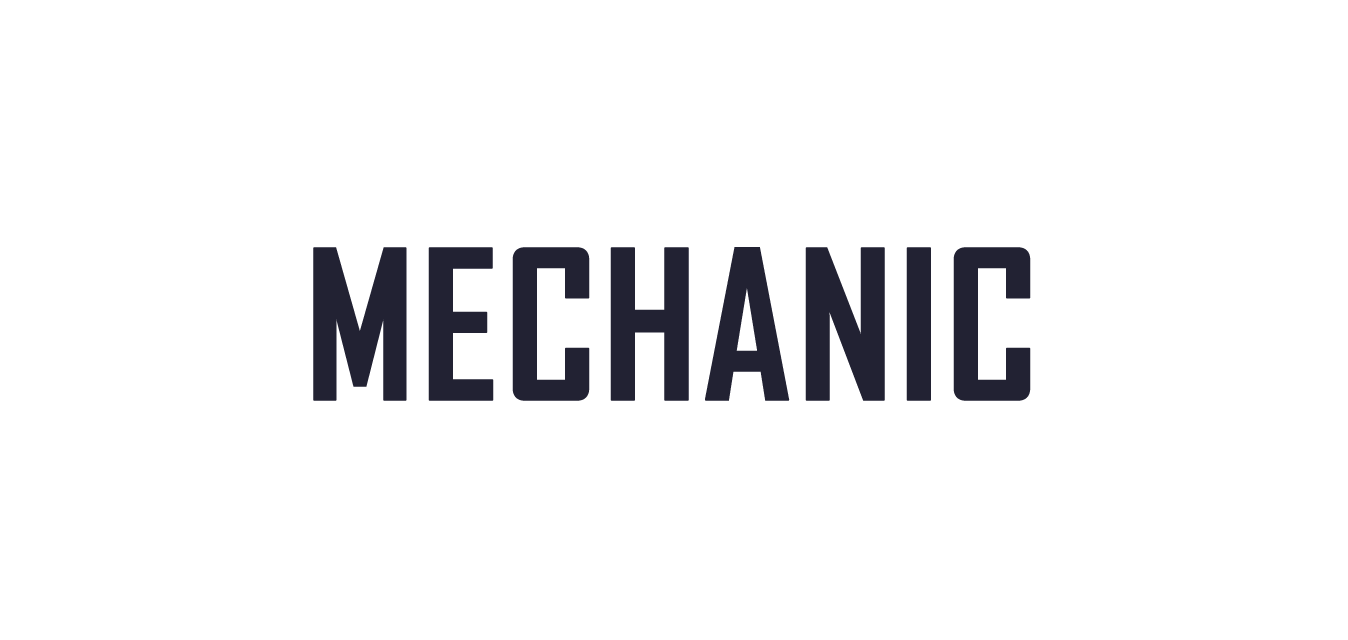
<style>
.page{position:relative;width:1348px;height:640px;background:#ffffff}
.page>*{position:absolute;margin:0}
.t1{font:199px "AgencyFB-Bold";color:#222233;font-weight:bold}
</style>
<div class="page">
<p class="t1" style="left:313px;top:247px;width:718px;height:154px">MECHANIC</p>
</div>
